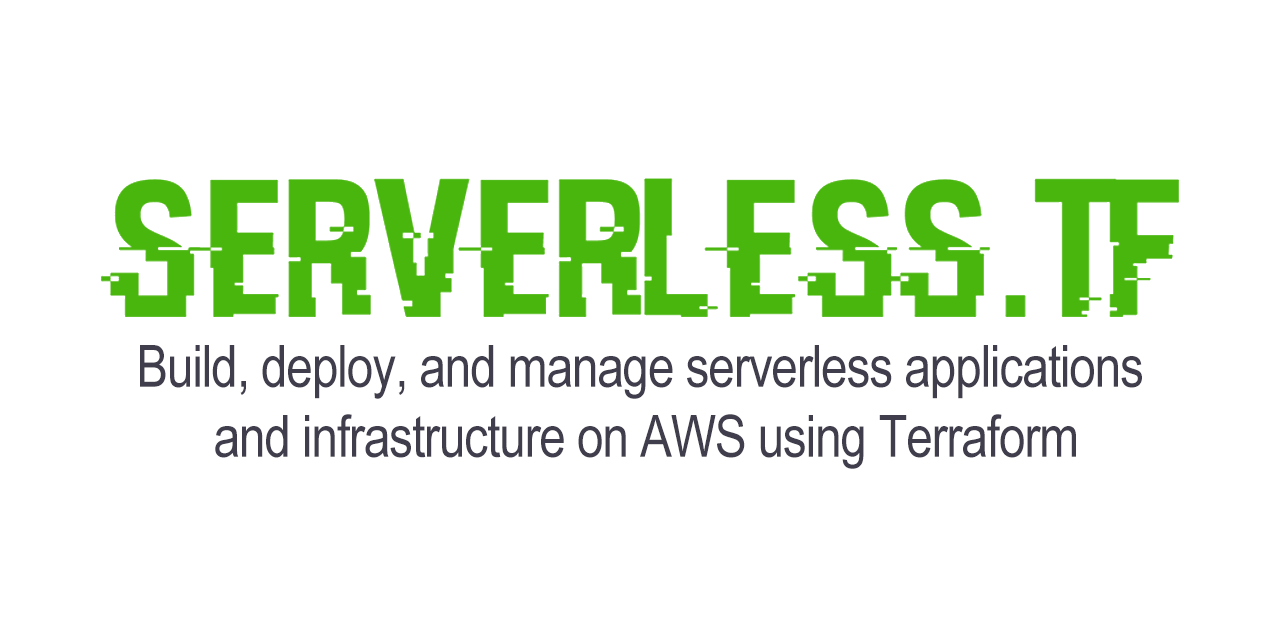
<style>
.page{position:relative;width:1280px;height:640px;background:#ffffff}
.page>*{position:absolute;margin:0}
.t1{font:58.3px "ArialNarrow";letter-spacing:-0.02em;color:#403e4c}
</style>
<div class="page">
<p class="t1" style="left:140px;top:345px;width:1002px;height:124px;text-align:center">Build, deploy, and manage serverless applications <br>and infrastructure on AWS using Terraform</p>
</div>
